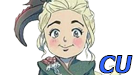
<style>
.page{position:relative;width:135px;height:75px;background:#ffffff}
.page>*{position:absolute;margin:0}
.t1{font:24px "Tahoma-Bold";letter-spacing:-0.065em;font-weight:bold;font-style:italic}
</style>
<div class="page">
<p class="t1" style="left:99px;top:55px;width:34px;height:19px">CU</p>
</div>
